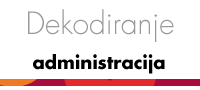
<style>
.page{position:relative;width:200px;height:90px;background:#ffffff}
.page>*{position:absolute;margin:0}
.t1{font:30px "FuturaCom-Light";color:#999999}
.t2{font:18px "FuturaCom-Bold";color:#000000}
</style>
<div class="page">
<p class="t1" style="left:28px;top:9px;width:146px;height:33px">Dekodiranje</p>
<p class="t2" style="left:33px;top:54px;width:132px;height:20px">administracija</p>
</div>
